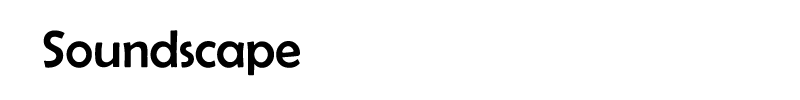
<style>
.page{position:relative;width:800px;height:100px;background:#ffffff}
.page>*{position:absolute;margin:0}
.t1{font:52.9px "BerlinSansFB-Reg";color:#000000}
</style>
<div class="page">
<p class="t1" style="left:43px;top:30px;width:257px;height:46px">Soundscape</p>
</div>
